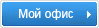
<style>
.page{position:relative;width:99px;height:28px}
.page>*{position:absolute;margin:0}
.t1{font:12px "ArialMT";color:#ffffff}
</style>
<div class="page">
<p class="t1" style="left:19px;top:8px;width:54px;height:12px">Мой офис</p>
</div>
